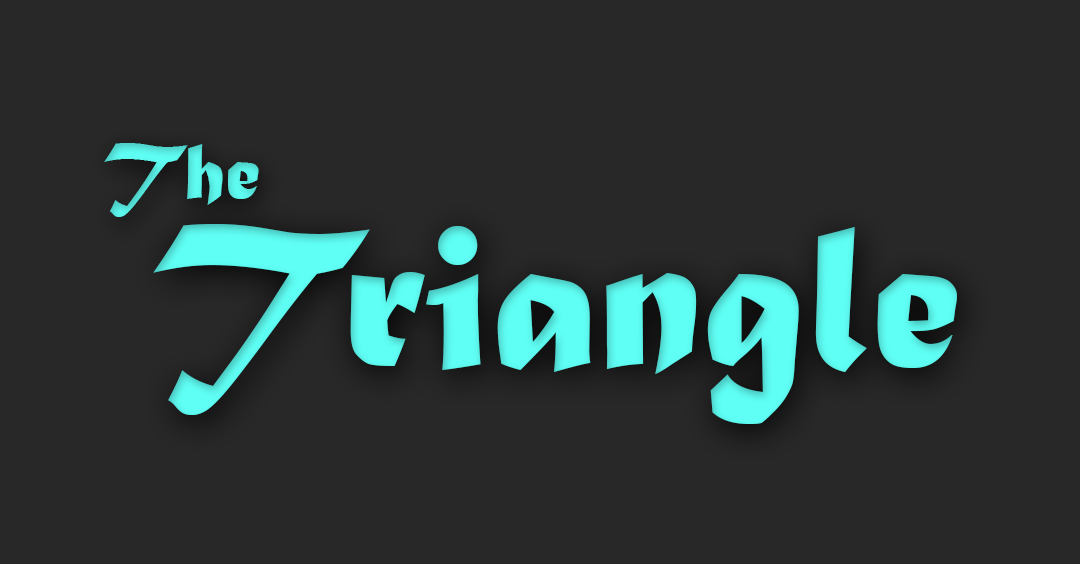
<style>
.page{position:relative;width:1080px;height:564px;background:#282828}
.page>*{position:absolute;margin:0}
.t1{font:84px "MaturaMTScriptCapitals";color:#5ffff5}
.t2{font:218px "MaturaMTScriptCapitals";color:#5ffff5}
</style>
<div class="page">
<p class="t1" style="left:104px;top:143px;width:155px;height:74px">The</p>
<p class="t2" style="left:153px;top:224px;width:804px;height:200px">Triangle</p>
</div>
